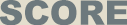
<style>
.page{position:relative;width:127px;height:25px;background:#6d797d}
.page>*{position:absolute;margin:0}
.t1{font:34px "Arial-Black";color:#6d797d;text-transform:uppercase}
</style>
<div class="page">
<p class="t1" style="left:0px;top:0px;width:128px;height:26px">SCORE</p>
</div>
